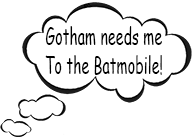
<style>
.page{position:relative;width:195px;height:138px;background:#ffffff}
.page>*{position:absolute;margin:0}
.t1{font:24.2px "ComicSansMS";color:#000000;scale:0.59 1}
</style>
<div class="page">
<p class="t1" style="left:45px;top:26px;width:117px;height:49px;text-align:center">Gotham needs me<br>To the Batmobile!</p>
</div>
